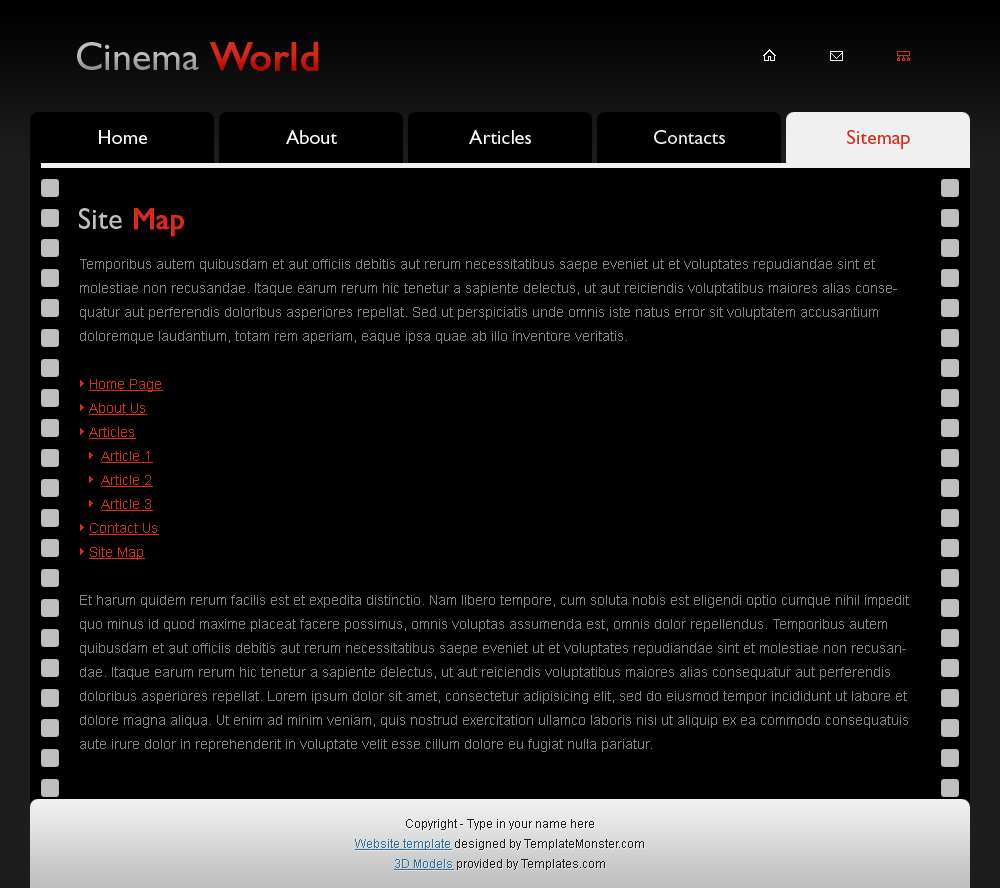
<style>
.page{position:relative;width:1000px;height:888px;background:#000000}
.page>*{position:absolute;margin:0}
.t1{font:40px "GillSans";color:#bfbfbf}
.t2{font:40px "GillSans";color:#d72a18;font-weight:bold}
.t3{font:20px "GillSans";color:#ffffff}
.t4{font:20px "GillSans";color:#f0f0f0}
.t5{font:20px "GillSans";color:#d72a18}
.t6{font:30px "GillSans";color:#bfbfbf}
.t7{font:30px "GillSans";color:#d72a18;font-weight:bold}
.t8{font:14px/24px "ArialMT";color:#858585}
.t9{font:14px/24px "ArialMT";color:#d72a18;text-decoration:underline}
.t10{font:12px/20px "ArialMT";color:#1d1d1d}
.t11{font:12px/20px "ArialMT";color:#2c6d9a;text-decoration:underline}
</style>
<div class="page">
<p class="t1" style="left:77px;top:42px;width:242px;height:29px">Cinema <span class="t2">World</span></p>
<p class="t3" style="left:99px;top:130px;width:48px;height:14px">Home</p>
<p class="t3" style="left:286px;top:130px;width:52px;height:14px">About          Articles          Contacts          Site map</p>
<p class="t3" style="left:469px;top:130px;width:62px;height:14px">Articles          Contacts          Site map</p>
<p class="t4" style="left:654px;top:130px;width:71px;height:14px">Contacts          Site map</p>
<p class="t5" style="left:847px;top:130px;width:63px;height:19px">Sitemap</p>
<p class="t6" style="left:79px;top:208px;width:105px;height:29px">Site<span class="t7"> Map</span></p>
<p class="t8" style="left:80px;top:259px;width:829px;height:493px">Temporibus autem quibusdam et aut officiis debitis aut rerum necessitatibus saepe eveniet ut et voluptates repudiandae sint et molestiae non recusandae. Itaque earum rerum hic tenetur a sapiente delectus, ut aut reiciendis voluptatibus maiores alias consequatur aut perferendis doloribus asperiores repellat. Sed ut perspiciatis unde omnis iste natus error sit voluptatem accusantium doloremque laudantium, totam rem aperiam, eaque ipsa quae ab illo inventore veritatis.<br><br><span class="t9">Home Page<br>About Us<br>Articles<br>   Article 1<br>   Article 2<br>   Article 3<br>Contact Us<br>Site Map<br><br></span>Et harum quidem rerum facilis est et expedita distinctio. Nam libero tempore, cum soluta nobis est eligendi optio cumque nihil impedit quo minus id quod maxime placeat facere possimus, omnis voluptas assumenda est, omnis dolor repellendus. Temporibus autem quibusdam et aut officiis debitis aut rerum necessitatibus saepe eveniet ut et voluptates repudiandae sint et molestiae non recusandae. Itaque earum rerum hic tenetur a sapiente delectus, ut aut reiciendis voluptatibus maiores alias consequatur aut perferendis doloribus asperiores repellat. Lorem ipsum dolor sit amet, consectetur adipisicing elit, sed do eiusmod tempor incididunt ut labore et dolore magna aliqua. Ut enim ad minim veniam, quis nostrud exercitation ullamco laboris nisi ut aliquip ex ea commodo consequatuis aute irure dolor in reprehenderit in voluptate velit esse cillum dolore eu fugiat nulla pariatur.</p>
<p class="t10" style="left:355px;top:819px;width:289px;height:51px;text-align:center">Copyright - Type in your name here<br><span class="t11">Website template</span> designed by TemplateMonster.com<br><span class="t11">3D Models</span> provided by Templates.com</p>
</div>
